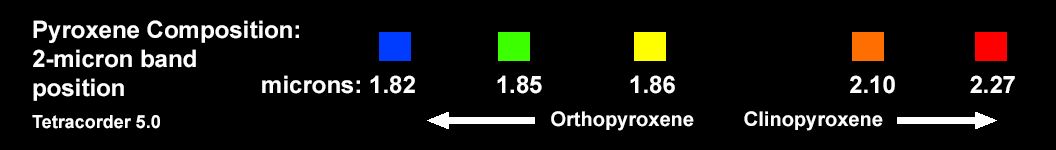
<style>
.page{position:relative;width:1056px;height:150px;background:#000000}
.page>*{position:absolute;margin:0}
.t1{font:24px "Arial-BoldMT";color:#fefefe}
.t2{font:18px "Arial-BoldMT";color:#fefefe}
.t3{font:20px "Arial-BoldMT";color:#fefefe}
</style>
<div class="page">
<p class="t1" style="left:32px;top:20px;width:267px;height:109px">Pyroxene Composition:<br>2-micron band<br>position<br><br><span class="t2">Tetracorder 5.0</span></p>
<p class="t1" style="left:262px;top:75px;width:753px;height:19px">microns: 1.82            1.85             1.86                          2.10           2.27</p>
<p class="t3" style="left:551px;top:111px;width:332px;height:20px">Orthopyroxene         Clinopyroxene</p>
</div>
